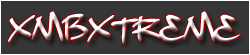
<style>
.page{position:relative;width:250px;height:55px;background:#373636}
.page>*{position:absolute;margin:0}
.t1{font:41px "DopeJam";text-transform:uppercase}
</style>
<div class="page">
<p class="t1" style="left:8px;top:11px;width:233px;height:33px">XMBXTREME</p>
</div>
